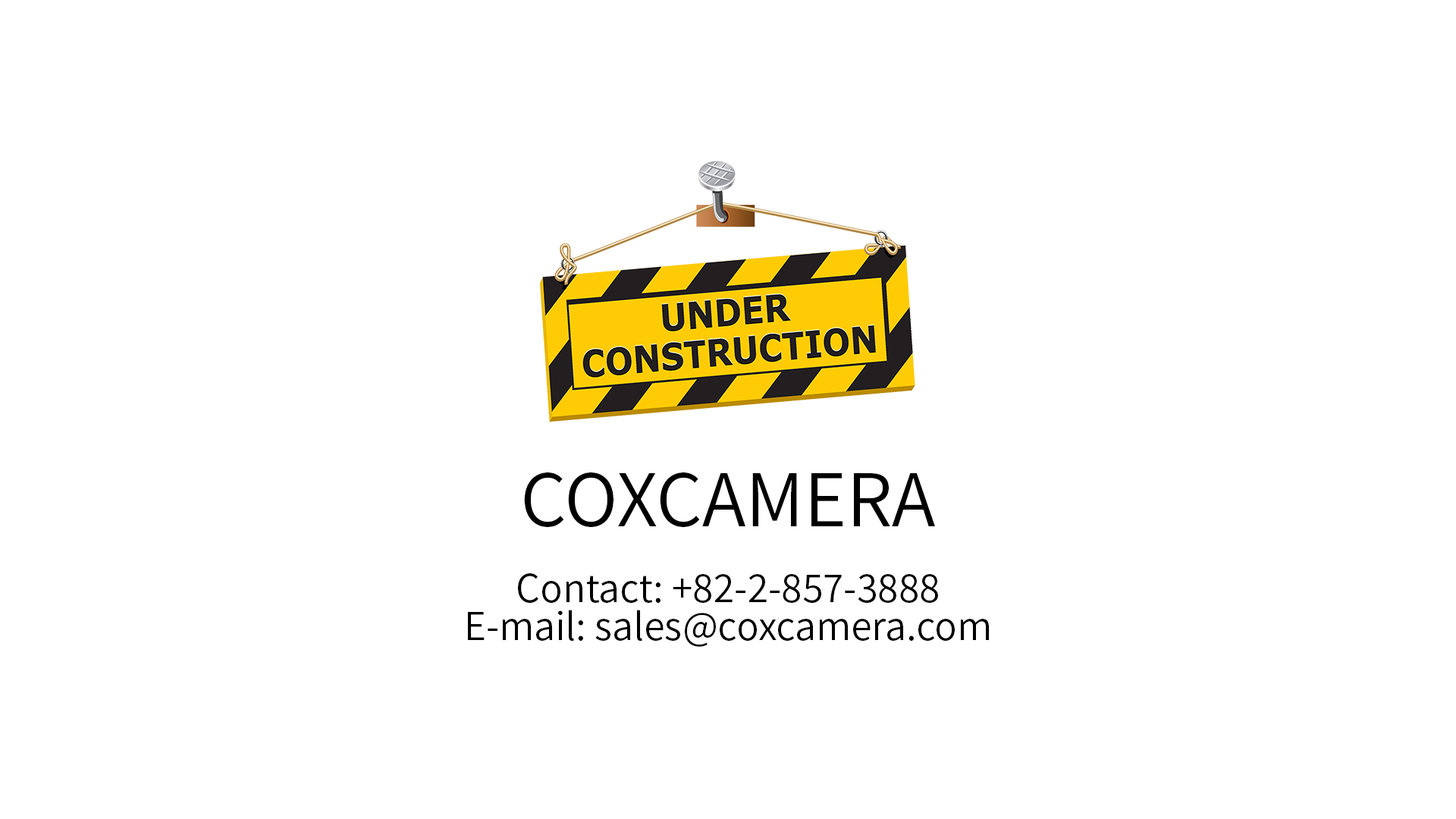
<style>
.page{position:relative;width:1456px;height:819px;background:#ffffff}
.page>*{position:absolute;margin:0}
.t1{font:9.1px/37.9px "SourceHanSansKR-Normal";color:#000000}
.t2{font:72.7px/37.9px "SourceHanSansKR-Normal";color:#000000}
</style>
<div class="page">
<p class="t1" style="left:468px;top:472px;width:521px;height:175px;text-align:center"><span class="t2">COXCAMERA<br><br></span>Contact: +82-2-857-3888<br>E-mail: sales@coxcamera.com</p>
</div>
